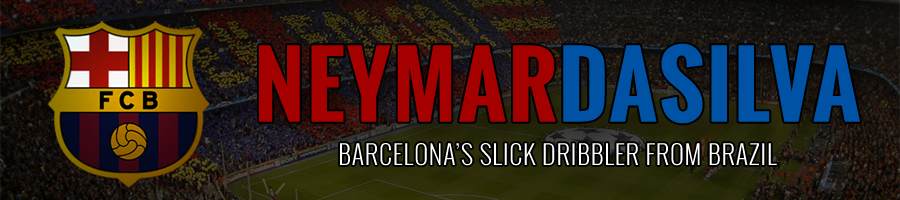
<style>
.page{position:relative;width:900px;height:200px}
.page>*{position:absolute;margin:0}
.t1{font:25.8px/43.2px "Oswald-Light";letter-spacing:0.03em;color:#ffffff;text-transform:uppercase}
.t2{font:87px/54px "Oswald-Bold";letter-spacing:0.03em;color:#a40000;text-transform:uppercase}
.t3{font:87px/54px "Oswald-Bold";letter-spacing:0.03em;color:#0053a4;text-transform:uppercase}
</style>
<div class="page">
<p class="t1" style="left:259px;top:43px;width:601px;height:123px;text-align:center"><span class="t2">neymar</span><span class="t3">dasilva<br></span>Barcelona’s slick dribbler from brazil</p>
</div>
